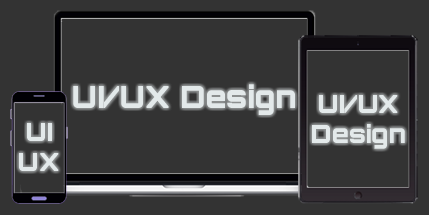
<style>
.page{position:relative;width:429px;height:215px;background:#333333}
.page>*{position:absolute;margin:0}
.t1{font:30.6px "Orbitron-Black";color:#e3e9ea}
.t2{font:25px "Orbitron-Black";color:#e3e9ea}
</style>
<div class="page">
<p class="t1" style="left:73px;top:84px;width:222px;height:31px">UI/UX Design</p>
<p class="t2" style="left:312px;top:95px;width:93px;height:54px;text-align:center">UI/UX<br>Design</p>
<p class="t2" style="left:19px;top:123px;width:40px;height:48px;text-align:center">UI<br>UX</p>
</div>
